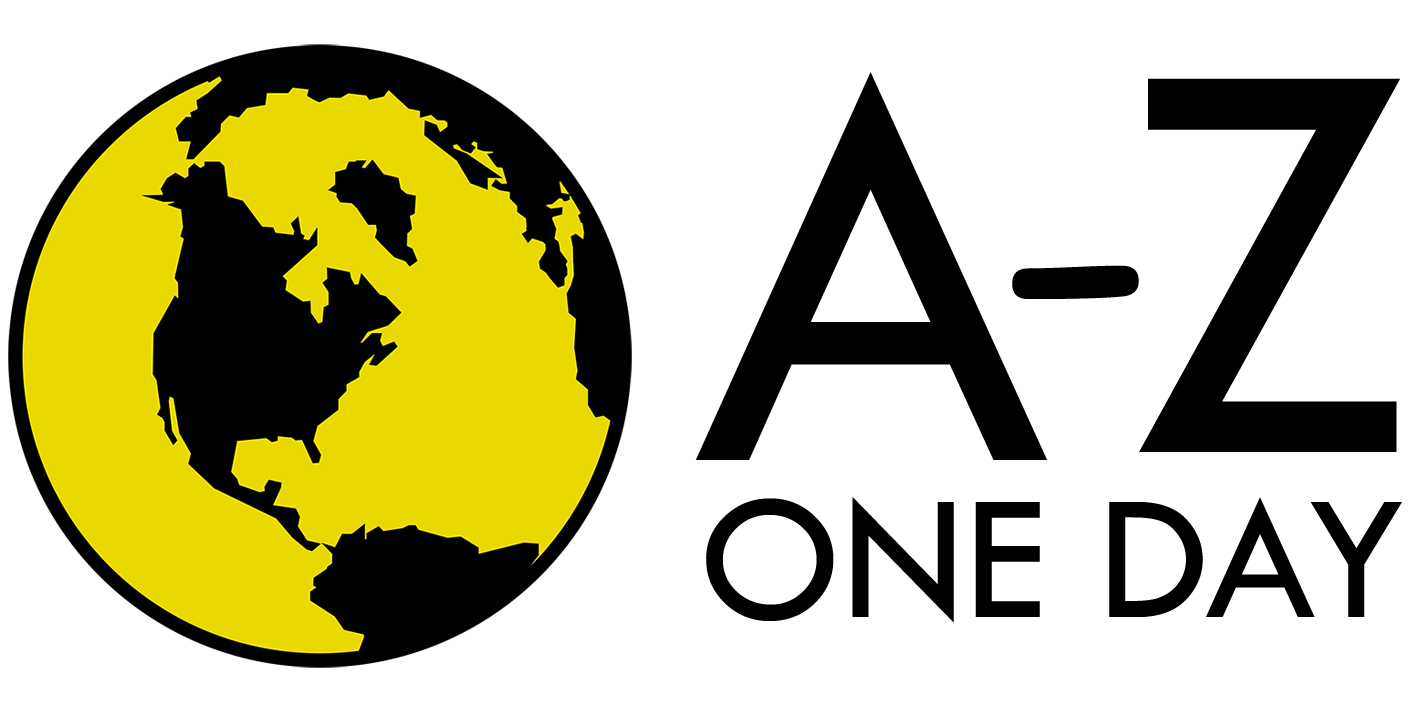
<style>
.page{position:relative;width:1424px;height:720px;background:#ffffff}
.page>*{position:absolute;margin:0}
.t1{font:600px "TwCenMT-Regular";color:#000000}
.t2{font:400px "ComicSansMS";color:#000000}
.t3{font:185px "TwCenMT-Regular";color:#000000}
</style>
<div class="page">
<p class="t1" style="left:695px;top:72px;width:352px;height:388px">A</p>
<p class="t1" style="left:1139px;top:78px;width:261px;height:374px">Z</p>
<p class="t2" style="left:1012px;top:265px;width:127px;height:34px">-</p>
<p class="t3" style="left:706px;top:497px;width:696px;height:126px">ONE DAY</p>
</div>
